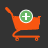
<style>
.page{position:relative;width:48px;height:48px;background:#333333}
.page>*{position:absolute;margin:0}
.t1{font:12.5px "Avenir-Black";color:#ffffff}
</style>
<div class="page">
<p class="t1" style="left:22px;top:13px;width:8px;height:7px">+</p>
</div>
